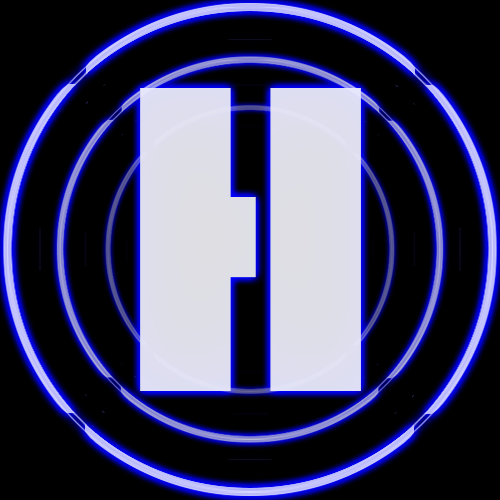
<style>
.page{position:relative;width:500px;height:500px;background:#000000}
.page>*{position:absolute;margin:0}
.t1{font:454.2px "Bauhaus93";color:#dedee9}
</style>
<div class="page">
<p class="t1" style="left:140px;top:88px;width:221px;height:303px">H</p>
</div>
